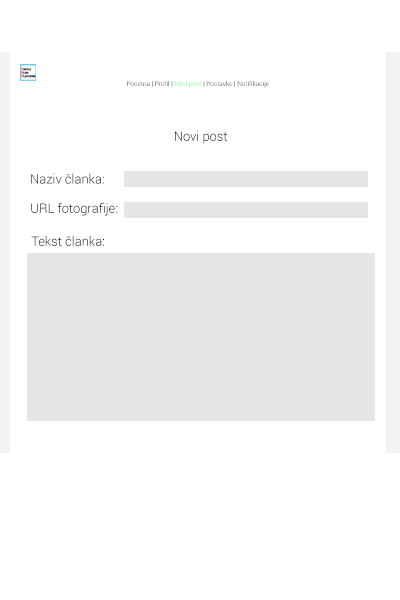
<style>
.page{position:relative;width:400px;height:600px;background:#ffffff}
.page>*{position:absolute;margin:0}
.t1{font:6.5px "Roboto-Light"}
.t2{font:12.9px "Roboto-Light";color:#1b1b1b}
.t3{font:12.9px "Roboto-Light"}
</style>
<div class="page">
<p class="t1" style="left:127px;top:81px;width:142px;height:7px">Pocetna | Profil | Novi post | Postavke | Notifikacije</p>
<p class="t2" style="left:175px;top:130px;width:53px;height:14px">Novi post</p>
<p class="t2" style="left:31px;top:173px;width:73px;height:11px">Naziv članka:</p>
<p class="t3" style="left:31px;top:202px;width:87px;height:14px">URL fotografije:</p>
<p class="t2" style="left:31px;top:235px;width:73px;height:11px">Tekst članka:</p>
</div>
